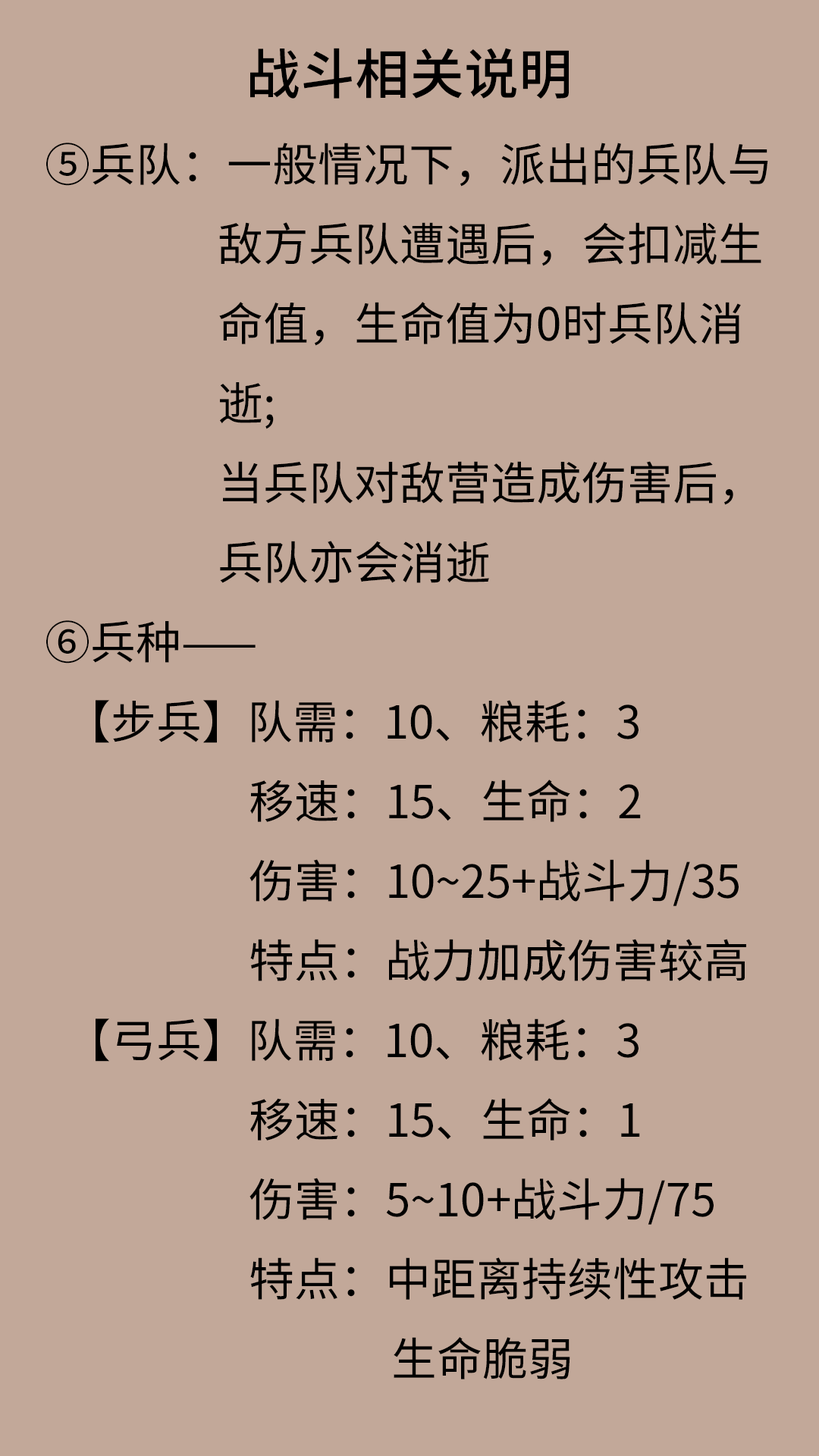
<style>
.page{position:relative;width:819px;height:1456px;background:#c2a899}
.page>*{position:absolute;margin:0}
.t1{font:45.5px "NotoSansHans-Regular";color:#000000}
.t2{font:54.6px "NotoSansHans-Medium";color:#000000}
</style>
<div class="page">
<p class="t1" style="left:46px;top:48px;width:722px;height:1331px;text-align:center"><span class="t2">战斗相关说明<br></span>⑤兵队：一般情况下，派出的兵队与<br>                 敌方兵队遭遇后，会扣减生<br>                 命值，生命值为0时兵队消<br>                 逝;<br>                 当兵队对敌营造成伤害后，<br>                 兵队亦会消逝<br>⑥兵种——<br>  【步兵】队需：10、粮耗：3<br>                    移速：15、生命：2<br>                    伤害：10~25+战斗力/35<br>                    特点：战力加成伤害较高<br>  【弓兵】队需：10、粮耗：3<br>                    移速：15、生命：1<br>                    伤害：5~10+战斗力/75<br>                    特点：中距离持续性攻击            <br>                                  生命脆弱</p>
</div>
